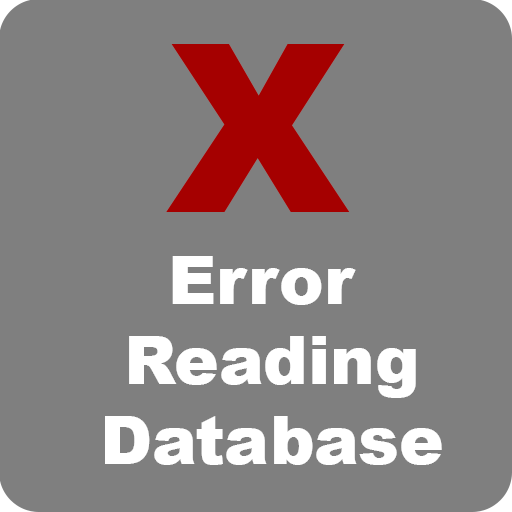
<style>
.page{position:relative;width:512px;height:512px;background:#7f7f7f}
.page>*{position:absolute;margin:0}
.t1{font:235.3px "Arial-Black";color:#a50000}
.t2{font:66.7px "Arial-Black";color:#ffffff}
</style>
<div class="page">
<p class="t1" style="left:166px;top:44px;width:184px;height:168px">X</p>
<p class="t2" style="left:105px;top:256px;width:337px;height:209px;text-align:center">Error <br>Reading<br>Database</p>
</div>
